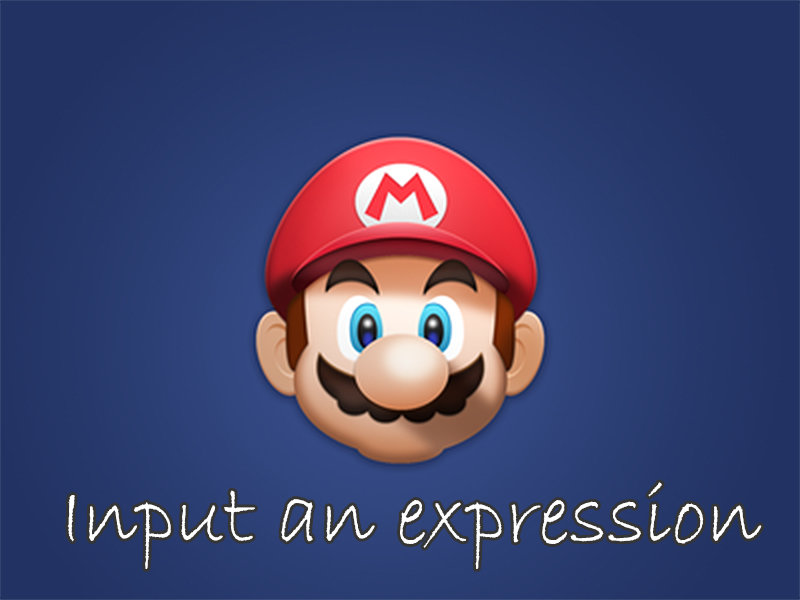
<style>
.page{position:relative;width:800px;height:600px}
.page>*{position:absolute;margin:0}
.t1{font:86.7px "BradleyHandITC";color:#ffffff}
</style>
<div class="page">
<p class="t1" style="left:67px;top:482px;width:695px;height:87px">Input an expression</p>
</div>
